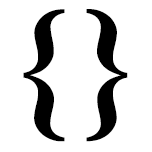
<style>
.page{position:relative;width:152px;height:152px;background:#ffffff}
.page>*{position:absolute;margin:0}
.t1{font:150px "TimesNewRomanPS-BoldMT";letter-spacing:0.06em;color:#000000}
</style>
<div class="page">
<p class="t1" style="left:23px;top:9px;width:105px;height:133px">{}</p>
</div>
